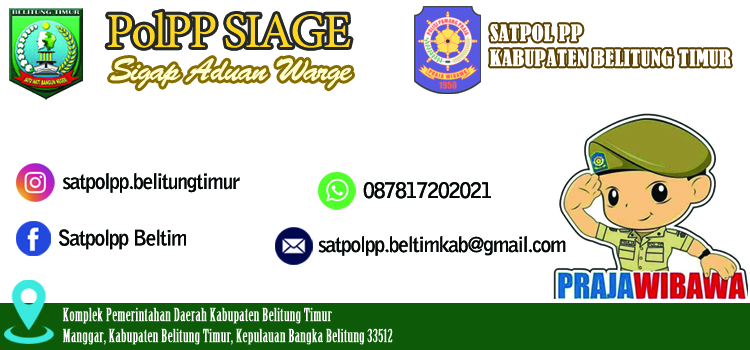
<style>
.page{position:relative;width:750px;height:350px;background:#ffffff}
.page>*{position:absolute;margin:0}
.t1{font:49.4px "MinionPro-Regular";letter-spacing:-0.05em;color:#fed61d}
.t2{font:31.8px "BrushScriptStd";letter-spacing:-0.05em;color:#fefdce}
.t3{font:21.2px "BellGothicStd-Bold";letter-spacing:-0.05em;color:#060808}
.t4{font:17.6px "BirchStd";color:#fffcff;font-weight:bold}
</style>
<div class="page">
<p class="t1" style="left:107px;top:11px;width:244px;height:37px">PolPP SIAGE</p>
<p class="t2" style="left:110px;top:58px;width:242px;height:31px">Sigap Aduan Warge</p>
<p class="t3" style="left:63px;top:173px;width:177px;height:20px">satpolpp.belitungtimur</p>
<p class="t3" style="left:363px;top:182px;width:128px;height:17px">087817202021</p>
<p class="t3" style="left:59px;top:229px;width:127px;height:21px">Satpolpp Beltim</p>
<p class="t3" style="left:318px;top:236px;width:248px;height:20px">satpolpp.beltimkab@gmail.com</p>
<p class="t4" style="left:62px;top:307px;width:331px;height:38px">Komplek Pemerintahan Daerah Kabupaten Belitung Timur<br>Manggar, Kabupaten Belitung Timur, Kepulauan Bangka Belitung 33512</p>
</div>
